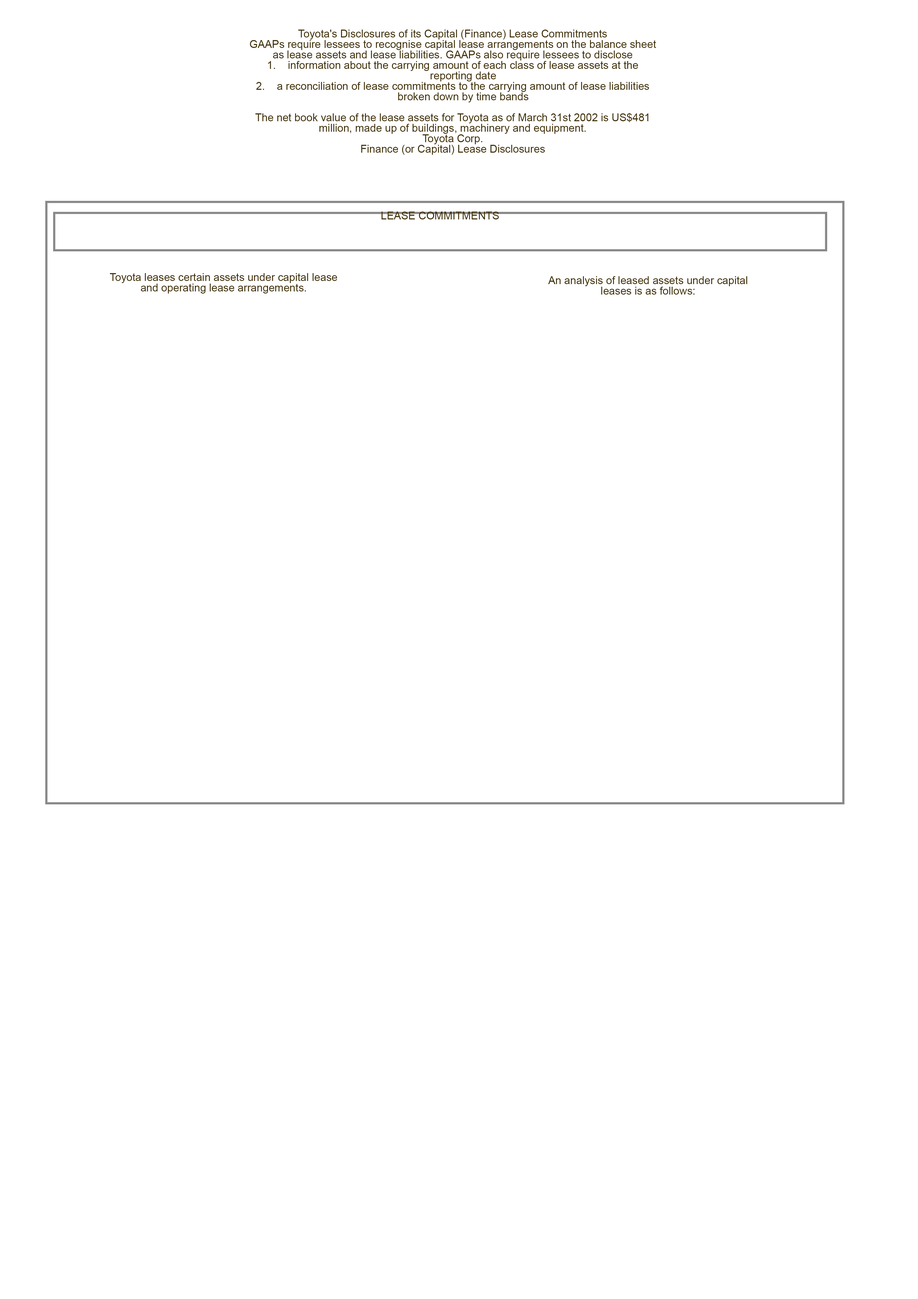
<style>
.page{position:relative;width:918px;height:1299px;background:#ffffff}
.page>*{position:absolute;margin:0}
.t1{font:10.7px/10.5px "ArialMT";color:#403006}
.t2{font:10.7px "ArialMT";color:#403006}
</style>
<div class="page">
<p class="t1" style="left:250px;top:30px;width:406px;height:125px;text-align:center">Toyota's Disclosures of its Capital (Finance) Lease Commitments<br>GAAPs require lessees to recognise capital lease arrangements on the balance sheet <br>as lease assets and lease liabilities. GAAPs also require lessees to disclose<br>1.    information about the carrying amount of each class of lease assets at the <br>       reporting date<br>2.    a reconciliation of lease commitments to the carrying amount of lease liabilities <br>       broken down by time bands<br> <br>The net book value of the lease assets for Toyota as of March 31st 2002 is US$481 <br>million, made up of buildings, machinery and equipment.<br>Toyota Corp.<br>Finance (or Capital) Lease Disclosures</p>
<p class="t2" style="left:382px;top:212px;width:117px;height:7px">LEASE COMMITMENTS</p>
<p class="t1" style="left:110px;top:273px;width:227px;height:20px;text-align:center">Toyota leases certain assets under capital lease <br>and operating lease arrangements.</p>
<p class="t1" style="left:548px;top:276px;width:200px;height:18px;text-align:center">An analysis of leased assets under capital <br>leases is as follows:</p>
</div>
